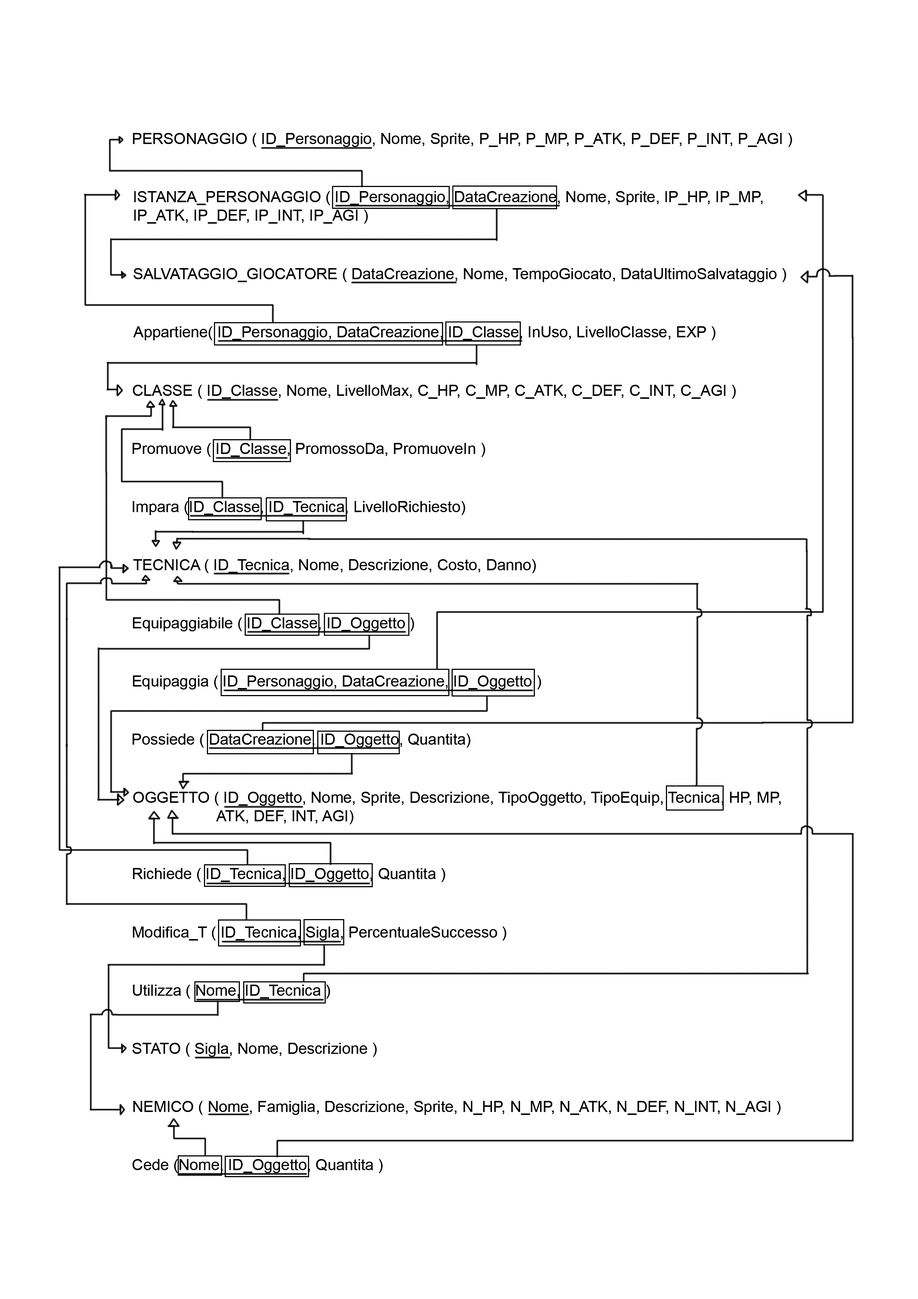
<style>
.page{position:relative;width:918px;height:1299px;background:#ffffff}
.page>*{position:absolute;margin:0}
.t1{font:15.4px "ArialMT";color:#000000}
</style>
<div class="page">
<p class="t1" style="left:133px;top:133px;width:659px;height:14px">PERSONAGGIO ( ID_Personaggio, Nome, Sprite, P_HP, P_MP, P_ATK, P_DEF, P_INT, P_AGI )</p>
<p class="t1" style="left:134px;top:191px;width:629px;height:33px">ISTANZA_PERSONAGGIO ( ID_Personaggio, DataCreazione, Nome, Sprite, IP_HP, IP_MP,<br>IP_ATK, IP_DEF, IP_INT, IP_AGI )</p>
<p class="t1" style="left:134px;top:268px;width:652px;height:14px">SALVATAGGIO_GIOCATORE ( DataCreazione, Nome, TempoGiocato, DataUltimoSalvataggio )</p>
<p class="t1" style="left:133px;top:326px;width:583px;height:14px">Appartiene( ID_Personaggio, DataCreazione, ID_Classe, InUso, LivelloClasse, EXP )</p>
<p class="t1" style="left:133px;top:385px;width:603px;height:14px">CLASSE ( ID_Classe, Nome, LivelloMax, C_HP, C_MP, C_ATK, C_DEF, C_INT, C_AGI )</p>
<p class="t1" style="left:133px;top:443px;width:352px;height:14px">Promuove ( ID_Classe, PromossoDa, PromuoveIn )</p>
<p class="t1" style="left:133px;top:501px;width:332px;height:14px">Impara (ID_Classe, ID_Tecnica, LivelloRichiesto)</p>
<p class="t1" style="left:133px;top:559px;width:403px;height:14px">TECNICA ( ID_Tecnica, Nome, Descrizione, Costo, Danno)</p>
<p class="t1" style="left:133px;top:617px;width:281px;height:14px">Equipaggiabile ( ID_Classe, ID_Oggetto )</p>
<p class="t1" style="left:133px;top:675px;width:408px;height:14px">Equipaggia ( ID_Personaggio, DataCreazione, ID_Oggetto )</p>
<p class="t1" style="left:133px;top:733px;width:338px;height:14px">Possiede ( DataCreazione, ID_Oggetto, Quantita)</p>
<p class="t1" style="left:133px;top:792px;width:648px;height:32px">OGGETTO ( ID_Oggetto, Nome, Sprite, Descrizione, TipoOggetto, TipoEquip, Tecnica, HP, MP,<br>       ATK, DEF, INT, AGI)</p>
<p class="t1" style="left:133px;top:868px;width:312px;height:14px">Richiede ( ID_Tecnica, ID_Oggetto, Quantita )</p>
<p class="t1" style="left:133px;top:926px;width:373px;height:14px">Modifica_T ( ID_Tecnica, Sigla, PercentualeSuccesso )</p>
<p class="t1" style="left:133px;top:984px;width:197px;height:14px">Utilizza ( Nome, ID_Tecnica )</p>
<p class="t1" style="left:133px;top:1043px;width:244px;height:14px">STATO ( Sigla, Nome, Descrizione )</p>
<p class="t1" style="left:133px;top:1101px;width:648px;height:14px">NEMICO ( Nome, Famiglia, Descrizione, Sprite, N_HP, N_MP, N_ATK, N_DEF, N_INT, N_AGI )</p>
<p class="t1" style="left:133px;top:1159px;width:250px;height:14px">Cede (Nome, ID_Oggetto, Quantita )</p>
</div>
